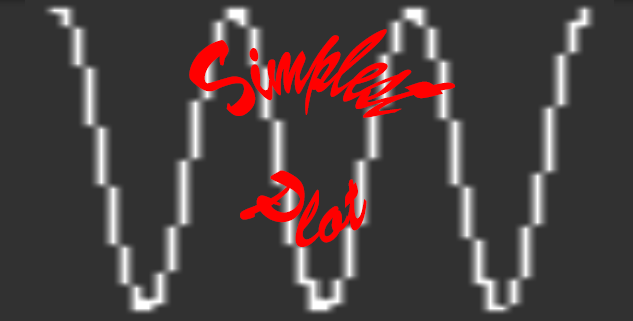
<style>
.page{position:relative;width:633px;height:321px;background:#313131}
.page>*{position:absolute;margin:0}
.t1{font:60px "BrushScriptStd";color:#ff0000}
</style>
<div class="page">
<p class="t1" style="left:189px;top:29px;width:267px;height:89px">Simplest</p>
<p class="t1" style="left:240px;top:170px;width:127px;height:77px">Plot</p>
</div>
